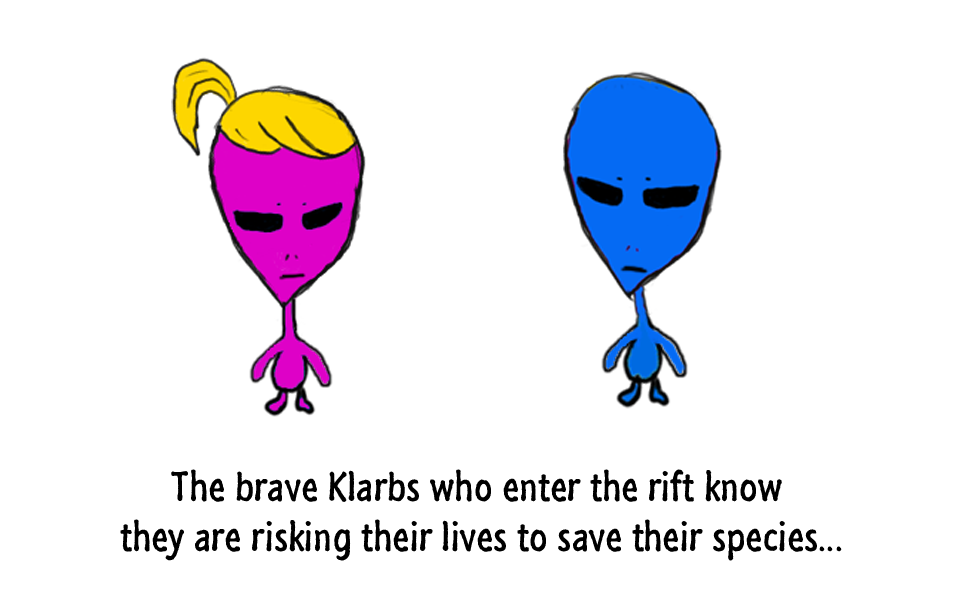
<style>
.page{position:relative;width:960px;height:600px;background:#ffffff}
.page>*{position:absolute;margin:0}
.t1{font:42px "SegoeMarker";color:#000000}
</style>
<div class="page">
<p class="t1" style="left:120px;top:469px;width:722px;height:92px;text-align:center">The brave Klarbs who enter the rift know <br>they are risking their lives to save their species...</p>
</div>
